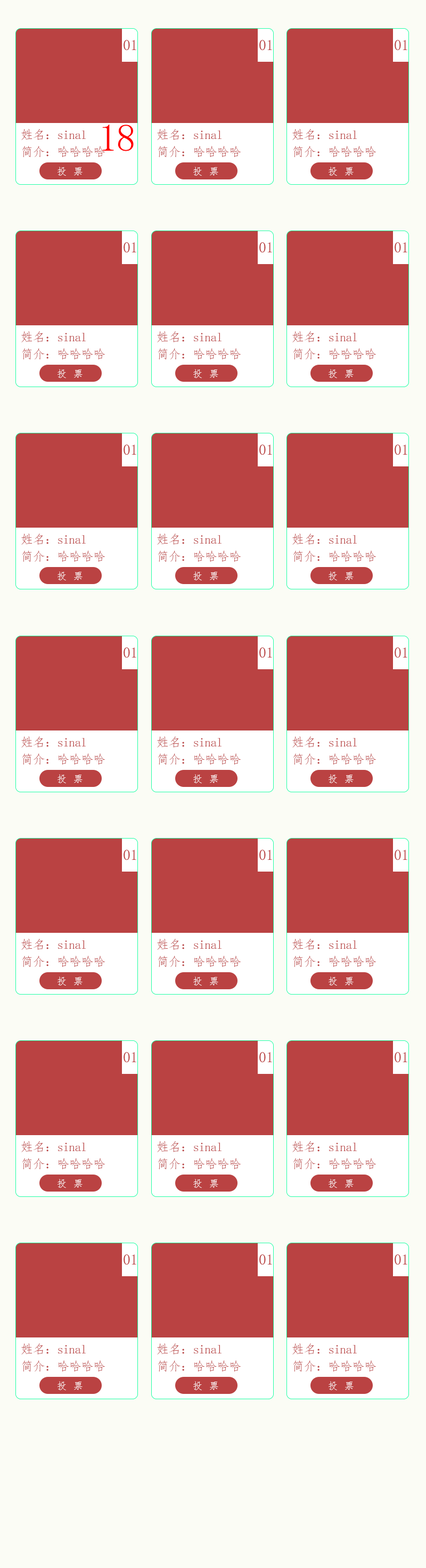
<style>
.page{position:relative;width:426px;height:1568px;background:#fbfcf5}
.page>*{position:absolute;margin:0}
.t1{font:15.1px "FangSong";letter-spacing:-0.02em;color:#ba4242}
.t2{font:38.3px "FangSong";letter-spacing:-0.02em;color:#ff0000}
.t3{font:12.4px "FangSong";letter-spacing:-0.02em;color:#ba4242}
.t4{font:9.8px "FangSong";letter-spacing:0.68em;color:#ffffff}
</style>
<div class="page">
<p class="t1" style="left:124px;top:40px;width:12px;height:11px">01</p>
<p class="t1" style="left:259px;top:40px;width:13px;height:11px">01</p>
<p class="t1" style="left:395px;top:40px;width:12px;height:11px">01</p>
<p class="t2" style="left:102px;top:125px;width:32px;height:26px">18</p>
<p class="t3" style="left:21px;top:129px;width:65px;height:11px">姓名：sinal</p>
<p class="t3" style="left:157px;top:129px;width:64px;height:11px">姓名：sinal</p>
<p class="t3" style="left:292px;top:129px;width:65px;height:11px">姓名：sinal</p>
<p class="t3" style="left:22px;top:146px;width:83px;height:12px">简介：哈哈哈哈</p>
<p class="t3" style="left:158px;top:146px;width:83px;height:12px">简介：哈哈哈哈</p>
<p class="t3" style="left:293px;top:146px;width:83px;height:12px">简介：哈哈哈哈</p>
<p class="t4" style="left:58px;top:167px;width:25px;height:9px">投票</p>
<p class="t4" style="left:193px;top:167px;width:25px;height:9px">投票</p>
<p class="t4" style="left:329px;top:167px;width:25px;height:9px">投票</p>
<p class="t1" style="left:124px;top:242px;width:12px;height:11px">01</p>
<p class="t1" style="left:259px;top:242px;width:13px;height:11px">01</p>
<p class="t1" style="left:395px;top:242px;width:12px;height:11px">01</p>
<p class="t3" style="left:21px;top:331px;width:65px;height:11px">姓名：sinal</p>
<p class="t3" style="left:157px;top:331px;width:64px;height:11px">姓名：sinal</p>
<p class="t3" style="left:292px;top:331px;width:65px;height:11px">姓名：sinal</p>
<p class="t3" style="left:22px;top:348px;width:83px;height:12px">简介：哈哈哈哈</p>
<p class="t3" style="left:158px;top:348px;width:83px;height:12px">简介：哈哈哈哈</p>
<p class="t3" style="left:293px;top:348px;width:83px;height:12px">简介：哈哈哈哈</p>
<p class="t4" style="left:58px;top:369px;width:25px;height:9px">投票</p>
<p class="t4" style="left:193px;top:369px;width:25px;height:9px">投票</p>
<p class="t4" style="left:329px;top:369px;width:25px;height:9px">投票</p>
<p class="t1" style="left:124px;top:445px;width:12px;height:10px">01</p>
<p class="t1" style="left:259px;top:445px;width:13px;height:10px">01</p>
<p class="t1" style="left:395px;top:445px;width:12px;height:10px">01</p>
<p class="t3" style="left:21px;top:533px;width:65px;height:12px">姓名：sinal</p>
<p class="t3" style="left:157px;top:533px;width:64px;height:12px">姓名：sinal</p>
<p class="t3" style="left:292px;top:533px;width:65px;height:12px">姓名：sinal</p>
<p class="t3" style="left:22px;top:551px;width:83px;height:11px">简介：哈哈哈哈</p>
<p class="t3" style="left:158px;top:551px;width:83px;height:11px">简介：哈哈哈哈</p>
<p class="t3" style="left:293px;top:551px;width:83px;height:11px">简介：哈哈哈哈</p>
<p class="t4" style="left:58px;top:571px;width:25px;height:9px">投票</p>
<p class="t4" style="left:193px;top:571px;width:25px;height:9px">投票</p>
<p class="t4" style="left:329px;top:571px;width:25px;height:9px">投票</p>
<p class="t1" style="left:124px;top:647px;width:12px;height:11px">01</p>
<p class="t1" style="left:259px;top:647px;width:13px;height:11px">01</p>
<p class="t1" style="left:395px;top:647px;width:12px;height:11px">01</p>
<p class="t3" style="left:21px;top:736px;width:65px;height:12px">姓名：sinal</p>
<p class="t3" style="left:157px;top:736px;width:64px;height:12px">姓名：sinal</p>
<p class="t3" style="left:292px;top:736px;width:65px;height:12px">姓名：sinal</p>
<p class="t3" style="left:22px;top:753px;width:83px;height:12px">简介：哈哈哈哈</p>
<p class="t3" style="left:158px;top:753px;width:83px;height:12px">简介：哈哈哈哈</p>
<p class="t3" style="left:293px;top:753px;width:83px;height:12px">简介：哈哈哈哈</p>
<p class="t4" style="left:58px;top:774px;width:25px;height:9px">投票</p>
<p class="t4" style="left:193px;top:774px;width:25px;height:9px">投票</p>
<p class="t4" style="left:329px;top:774px;width:25px;height:9px">投票</p>
<p class="t1" style="left:124px;top:850px;width:12px;height:10px">01</p>
<p class="t1" style="left:259px;top:850px;width:13px;height:10px">01</p>
<p class="t1" style="left:395px;top:850px;width:12px;height:10px">01</p>
<p class="t3" style="left:21px;top:939px;width:65px;height:11px">姓名：sinal</p>
<p class="t3" style="left:157px;top:939px;width:64px;height:11px">姓名：sinal</p>
<p class="t3" style="left:292px;top:939px;width:65px;height:11px">姓名：sinal</p>
<p class="t3" style="left:22px;top:956px;width:83px;height:11px">简介：哈哈哈哈</p>
<p class="t3" style="left:158px;top:956px;width:83px;height:11px">简介：哈哈哈哈</p>
<p class="t3" style="left:293px;top:956px;width:83px;height:11px">简介：哈哈哈哈</p>
<p class="t4" style="left:58px;top:976px;width:25px;height:10px">投票</p>
<p class="t4" style="left:193px;top:976px;width:25px;height:10px">投票</p>
<p class="t4" style="left:329px;top:976px;width:25px;height:10px">投票</p>
<p class="t1" style="left:124px;top:1052px;width:12px;height:11px">01</p>
<p class="t1" style="left:259px;top:1052px;width:13px;height:11px">01</p>
<p class="t1" style="left:395px;top:1052px;width:12px;height:11px">01</p>
<p class="t3" style="left:21px;top:1141px;width:65px;height:11px">姓名：sinal</p>
<p class="t3" style="left:157px;top:1141px;width:64px;height:11px">姓名：sinal</p>
<p class="t3" style="left:292px;top:1141px;width:65px;height:11px">姓名：sinal</p>
<p class="t3" style="left:22px;top:1158px;width:83px;height:12px">简介：哈哈哈哈</p>
<p class="t3" style="left:158px;top:1158px;width:83px;height:12px">简介：哈哈哈哈</p>
<p class="t3" style="left:293px;top:1158px;width:83px;height:12px">简介：哈哈哈哈</p>
<p class="t4" style="left:58px;top:1179px;width:25px;height:9px">投票</p>
<p class="t4" style="left:193px;top:1179px;width:25px;height:9px">投票</p>
<p class="t4" style="left:329px;top:1179px;width:25px;height:9px">投票</p>
<p class="t1" style="left:124px;top:1254px;width:12px;height:11px">01</p>
<p class="t1" style="left:259px;top:1254px;width:13px;height:11px">01</p>
<p class="t1" style="left:395px;top:1254px;width:12px;height:11px">01</p>
<p class="t3" style="left:21px;top:1343px;width:65px;height:11px">姓名：sinal</p>
<p class="t3" style="left:157px;top:1343px;width:64px;height:11px">姓名：sinal</p>
<p class="t3" style="left:292px;top:1343px;width:65px;height:11px">姓名：sinal</p>
<p class="t3" style="left:22px;top:1360px;width:83px;height:12px">简介：哈哈哈哈</p>
<p class="t3" style="left:158px;top:1360px;width:83px;height:12px">简介：哈哈哈哈</p>
<p class="t3" style="left:293px;top:1360px;width:83px;height:12px">简介：哈哈哈哈</p>
<p class="t4" style="left:58px;top:1381px;width:25px;height:9px">投票</p>
<p class="t4" style="left:193px;top:1381px;width:25px;height:9px">投票</p>
<p class="t4" style="left:329px;top:1381px;width:25px;height:9px">投票</p>
</div>
